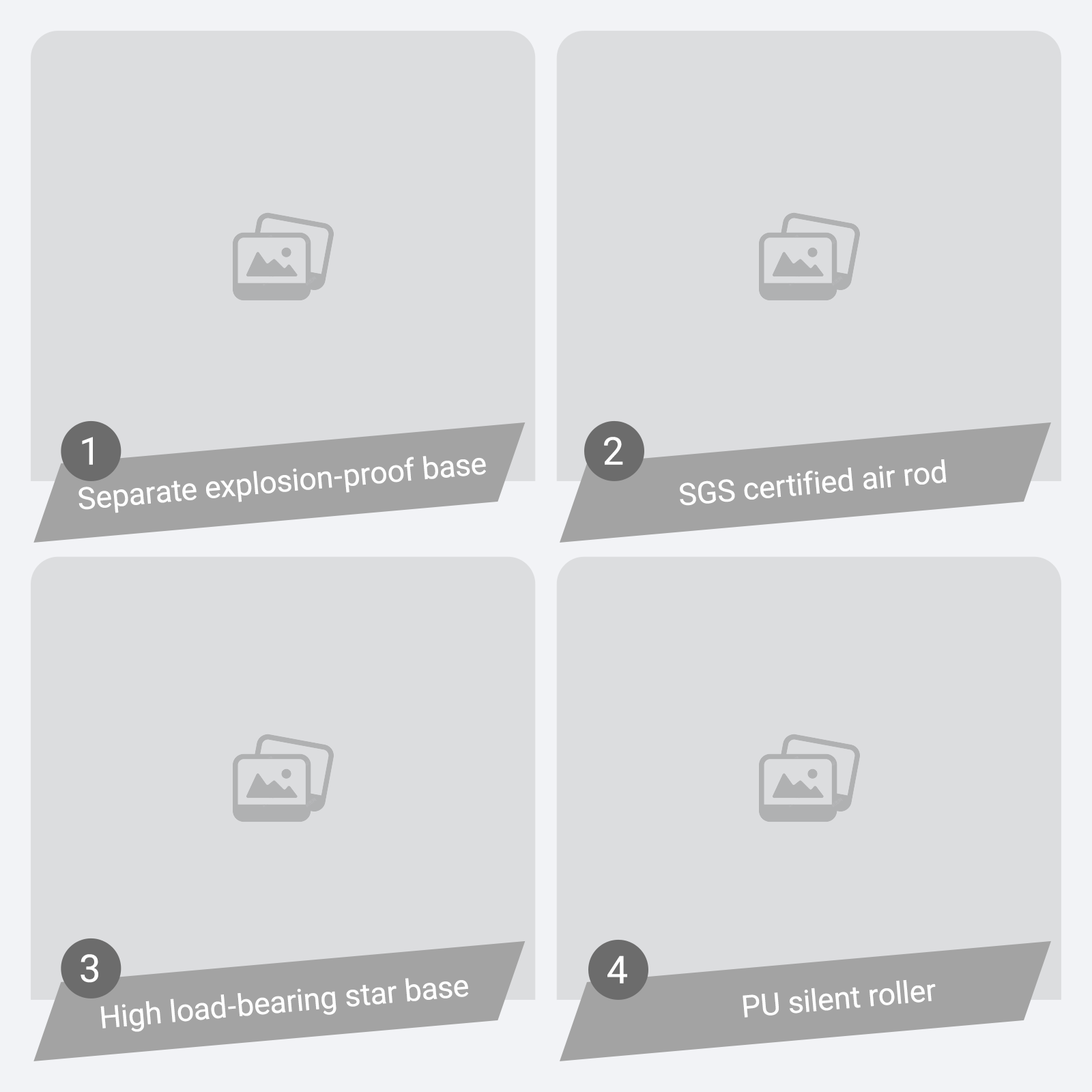
<style>
.page{position:relative;width:1092px;height:1092px;background:#dcdddf}
.page>*{position:absolute;margin:0}
.t1{font:38.2px "Roboto-Regular";color:#ffffff}
.t2{font:30.6px "Roboto-Regular";color:#ffffff}
</style>
<div class="page">
<p class="t1" style="left:82px;top:437px;width:11px;height:28px">1</p>
<p class="t1" style="left:604px;top:437px;width:19px;height:28px">2</p>
<p class="t2" style="left:78px;top:456px;width:408px;height:57px;rotate:-5deg">Separate explosion-proof base</p>
<p class="t2" style="left:680px;top:459px;width:267px;height:47px;rotate:-5deg">SGS certified air rod</p>
<p class="t1" style="left:81px;top:954px;width:17px;height:29px">3</p>
<p class="t1" style="left:607px;top:955px;width:20px;height:28px">4</p>
<p class="t2" style="left:100px;top:978px;width:369px;height:54px;rotate:-5deg">High load-bearing star base</p>
<p class="t2" style="left:743px;top:979px;width:193px;height:39px;rotate:-5deg">PU silent roller</p>
</div>
